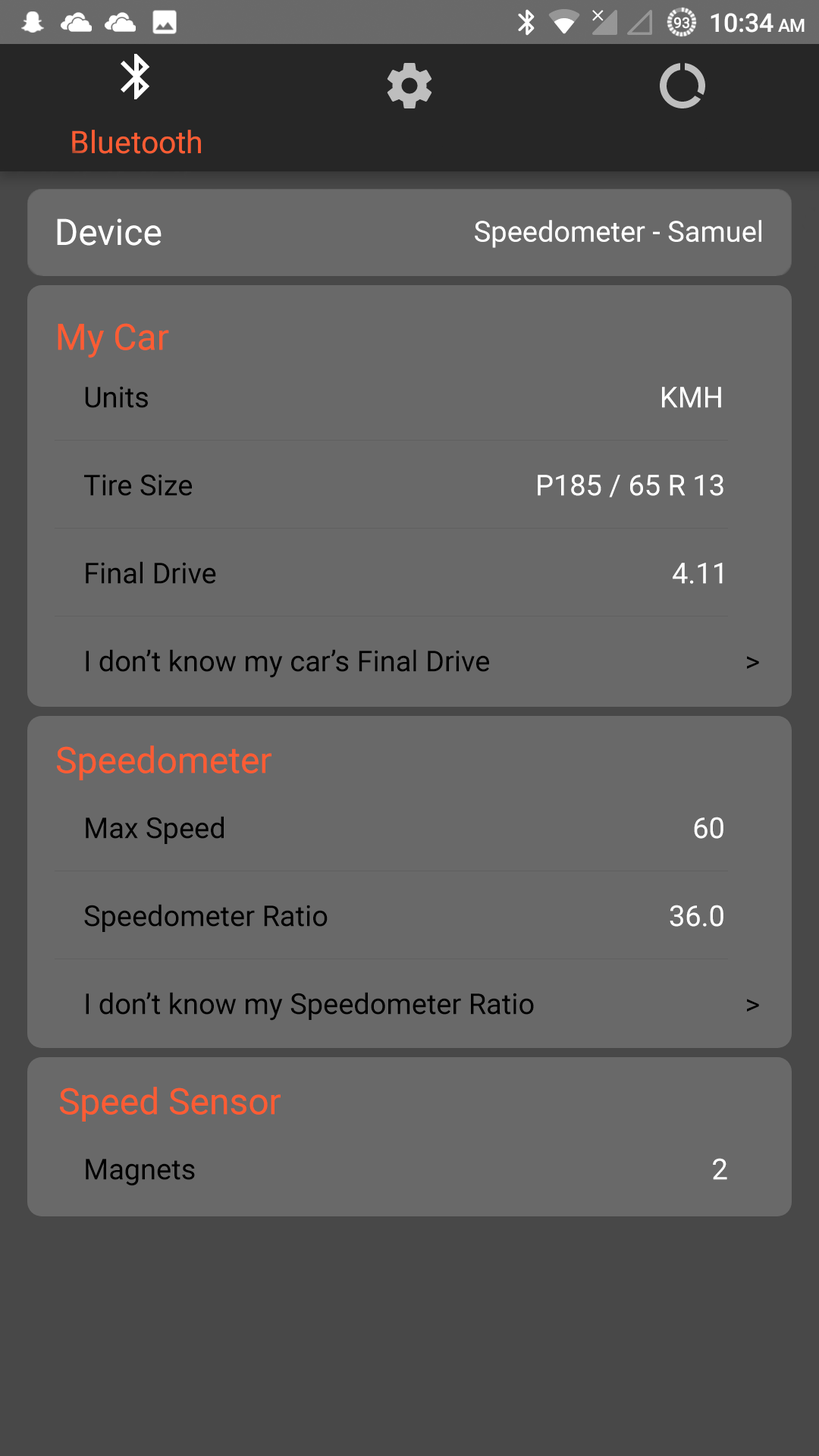
<style>
.page{position:relative;width:819px;height:1456px;background:#696969}
.page>*{position:absolute;margin:0}
.t1{font:36.4px "Roboto-Regular";color:#ffffff}
.t2{font:28.8px "Roboto-Regular";color:#ffffff}
.t3{font:36.4px "Roboto-Regular";color:#ff5c33}
.t4{font:28.8px "Roboto-Regular";color:#000000}
</style>
<div class="page">
<p class="t1" style="left:57px;top:218px;width:105px;height:28px">Device</p>
<p class="t2" style="left:475px;top:220px;width:286px;height:28px">Speedometer - Samuel</p>
<p class="t3" style="left:58px;top:323px;width:111px;height:35px">My Car</p>
<p class="t4" style="left:85px;top:386px;width:63px;height:22px">Units</p>
<p class="t2" style="left:662px;top:387px;width:59px;height:21px">KMH</p>
<p class="t4" style="left:84px;top:474px;width:108px;height:22px">Tire Size</p>
<p class="t2" style="left:538px;top:474px;width:185px;height:23px">P185 / 65 R 13</p>
<p class="t4" style="left:86px;top:561px;width:130px;height:23px">Final Drive</p>
<p class="t2" style="left:673px;top:563px;width:50px;height:21px">4.11</p>
<p class="t4" style="left:86px;top:649px;width:403px;height:29px">I don’t know my car’s Final Drive</p>
<p class="t4" style="left:747px;top:656px;width:12px;height:13px">&gt;</p>
<p class="t3" style="left:57px;top:745px;width:214px;height:35px">Speedometer</p>
<p class="t4" style="left:86px;top:816px;width:138px;height:28px">Max Speed</p>
<p class="t2" style="left:694px;top:817px;width:29px;height:22px">60</p>
<p class="t4" style="left:84px;top:904px;width:244px;height:28px">Speedometer Ratio</p>
<p class="t2" style="left:670px;top:905px;width:53px;height:22px">36.0</p>
<p class="t4" style="left:86px;top:992px;width:448px;height:29px">I don’t know my Speedometer Ratio</p>
<p class="t4" style="left:747px;top:999px;width:12px;height:13px">&gt;</p>
<p class="t3" style="left:60px;top:1087px;width:221px;height:35px">Speed Sensor</p>
<p class="t2" style="left:713px;top:1158px;width:14px;height:22px">2</p>
<p class="t4" style="left:86px;top:1159px;width:109px;height:27px">Magnets</p>
</div>
